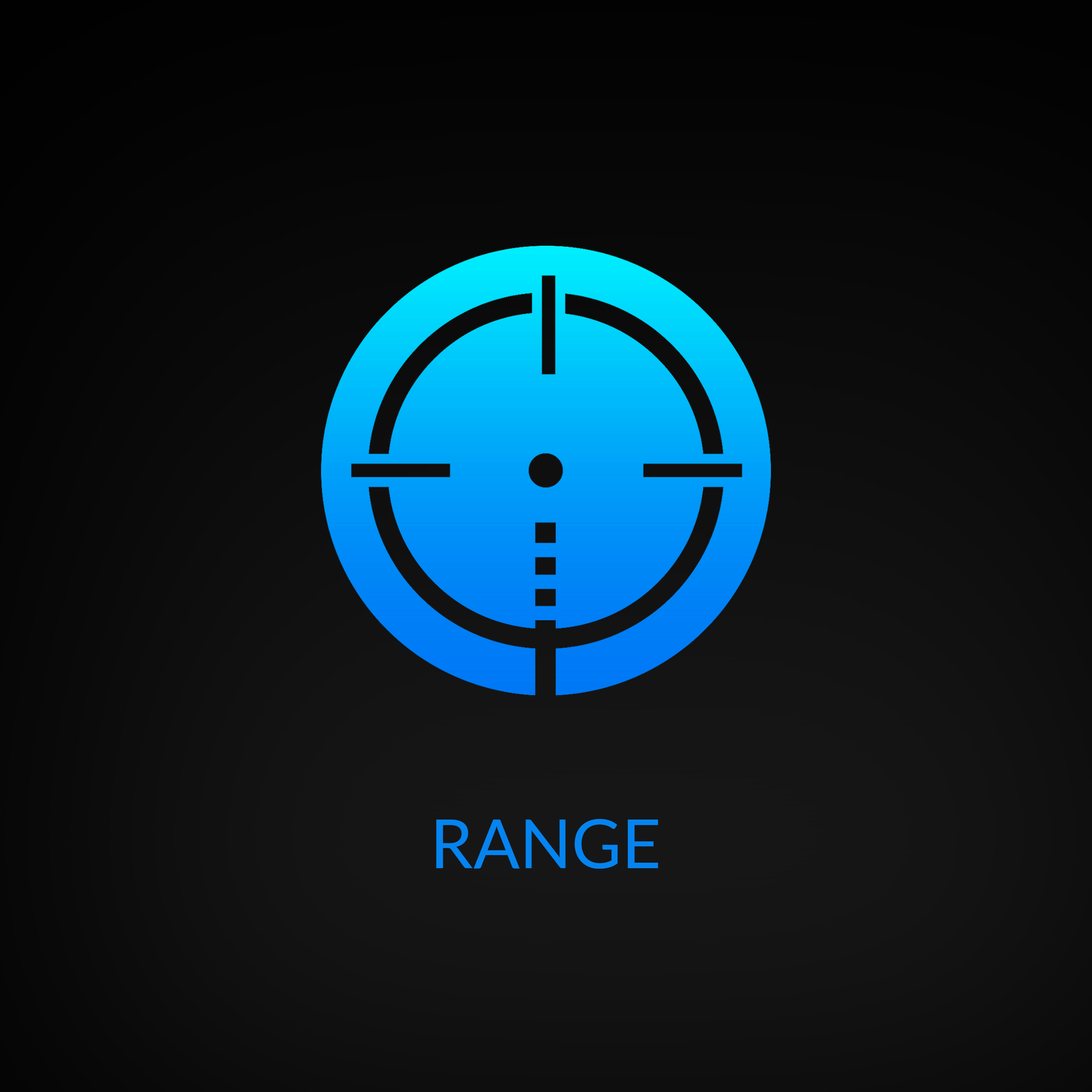
<style>
.page{position:relative;width:1092px;height:1092px}
.page>*{position:absolute;margin:0}
.t1{font:68.2px "Lato-Regular";color:#0584f0}
</style>
<div class="page">
<p class="t1" style="left:436px;top:819px;width:222px;height:50px">RANGE</p>
</div>
